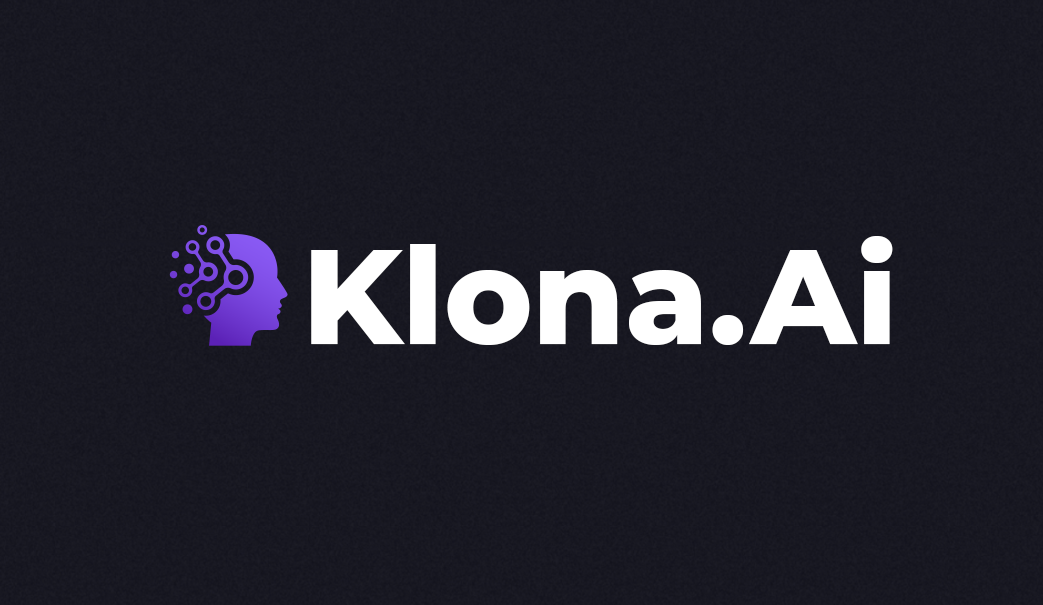
<style>
.page{position:relative;width:1043px;height:605px}
.page>*{position:absolute;margin:0}
.t1{font:133.4px "Montserrat-ExtraBold";color:#ffffff}
</style>
<div class="page">
<p class="t1" style="left:311px;top:236px;width:582px;height:109px">Klona.Ai</p>
</div>
